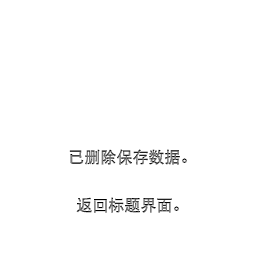
<style>
.page{position:relative;width:256px;height:256px;background:#ffffff}
.page>*{position:absolute;margin:0}
.t1{font:16px/24px "DFPHeiW5-GB"}
</style>
<div class="page">
<p class="t1" style="left:69px;top:149px;width:118px;height:64px;text-align:center">已删除保存数据。<br><br>返回标题界面。</p>
</div>
